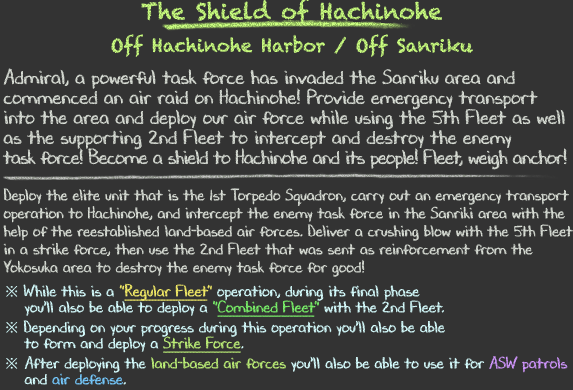
<style>
.page{position:relative;width:573px;height:390px;background:#333333}
.page>*{position:absolute;margin:0}
.t1{font:18px/36px "Chalkduster"}
.t2{font:22px/36px "Chalkduster"}
.t3{font:16px/18px "DJBChalkItUp";color:#d9ded6}
.t4{font:20px/20px "DJBChalkItUp";color:#d9ded6}
.t5{font:20px/20px "DJBChalkItUp";letter-spacing:-0.03em;color:#d9ded6}
.t6{font:16px/24px "DJBChalkItUp";color:#d9ded6}
.t7{font:16px/16px "TimesNewRomanPSMT";color:#d7feff}
.t8{font:16px/16px "DJBChalkItUp";color:#d7feff}
.t9{font:16px/16px "DJBChalkItUp";color:#f5ed68}
.t10{font:16px/16px "DJBChalkItUp";color:#f5ed68;text-decoration:underline}
.t11{font:16px/20px "DJBChalkItUp";color:#d7feff}
.t12{font:16px/20px "DJBChalkItUp";color:#7bf26b}
.t13{font:16px/20px "DJBChalkItUp";color:#7bf26b;text-decoration:underline}
.t14{font:16px/20px "DJBChalkItUp";color:#bdef78;text-decoration:underline}
.t15{font:16px/16px "DJBChalkItUp";color:#bdef78}
.t16{font:16px/16px "DJBChalkItUp";color:#d298ff}
.t17{font:16px/16px "DJBChalkItUp";color:#77cbff}
</style>
<div class="page">
<p class="t1" style="left:111px;top:0px;width:362px;height:57px;text-align:center"><span class="t2">The Shield of Hachinohe<br></span>Off Hachinohe Harbor / Off Sanriku</p>
<p class="t3" style="left:2px;top:68px;width:571px;height:317px"><span class="t4">Admiral, a powerful task force has invaded the Sanriku area and<br>commenced an air raid on Hachinohe! Provide emergency transport<br>into the area and deploy our air force while using the 5th Fleet as well<br>as the supporting 2nd Fleet to intercept and destroy the enemy<br></span><span class="t5">task force! Become a shield to Hachinohe and its people! Fleet, weigh anchor!<br><br></span>Deploy the elite unit that is the 1st Torpedo Squadron, carry out an emergency transport<br>operation to Hachinohe, and intercept the enemy task force in the Sanriki area with the<br>help of the reestablished land-based air forces. Deliver a crushing blow with the 5th Fleet<br>in a strike force, then use the 2nd Fleet that was sent as reinforcement from the<br>Yokosuka area to destroy the enemy task force for good<span class="t6">!<br></span><span class="t7">※ </span><span class="t8">While this is a </span><span class="t9">"</span><span class="t10">Regular Fleet</span><span class="t9">"</span><span class="t8"> operation, during its final phase<br>　</span><span class="t11"> you'll also be able to deploy a </span><span class="t12">"</span><span class="t13">Combined Fleet</span><span class="t12">"</span><span class="t11"> with the 2nd Fleet.<br></span><span class="t7">※ </span><span class="t8">Depending on your progress during this operation you'll also be able<br>　</span><span class="t11"> to form and deploy a </span><span class="t14">Strike Force</span><span class="t11">.<br></span><span class="t7">※</span><span class="t8"> After deploying the </span><span class="t15">land-based air forces</span><span class="t8"> you'll also be able to use it for </span><span class="t16">ASW patrols<br>　 </span><span class="t8">and </span><span class="t17">air defense</span><span class="t8">.</span></p>
</div>
